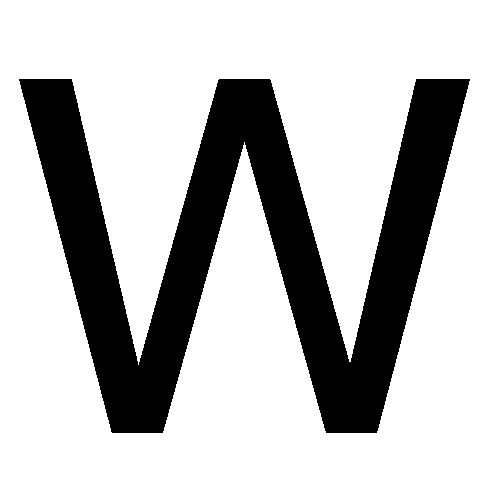
<style>
.page{position:relative;width:500px;height:500px;background:#ffffff}
.page>*{position:absolute;margin:0}
.t1{font:845px "Helvetica";color:#000000}
</style>
<div class="page">
<p class="t1" style="left:19px;top:79px;width:451px;height:354px">W</p>
</div>
